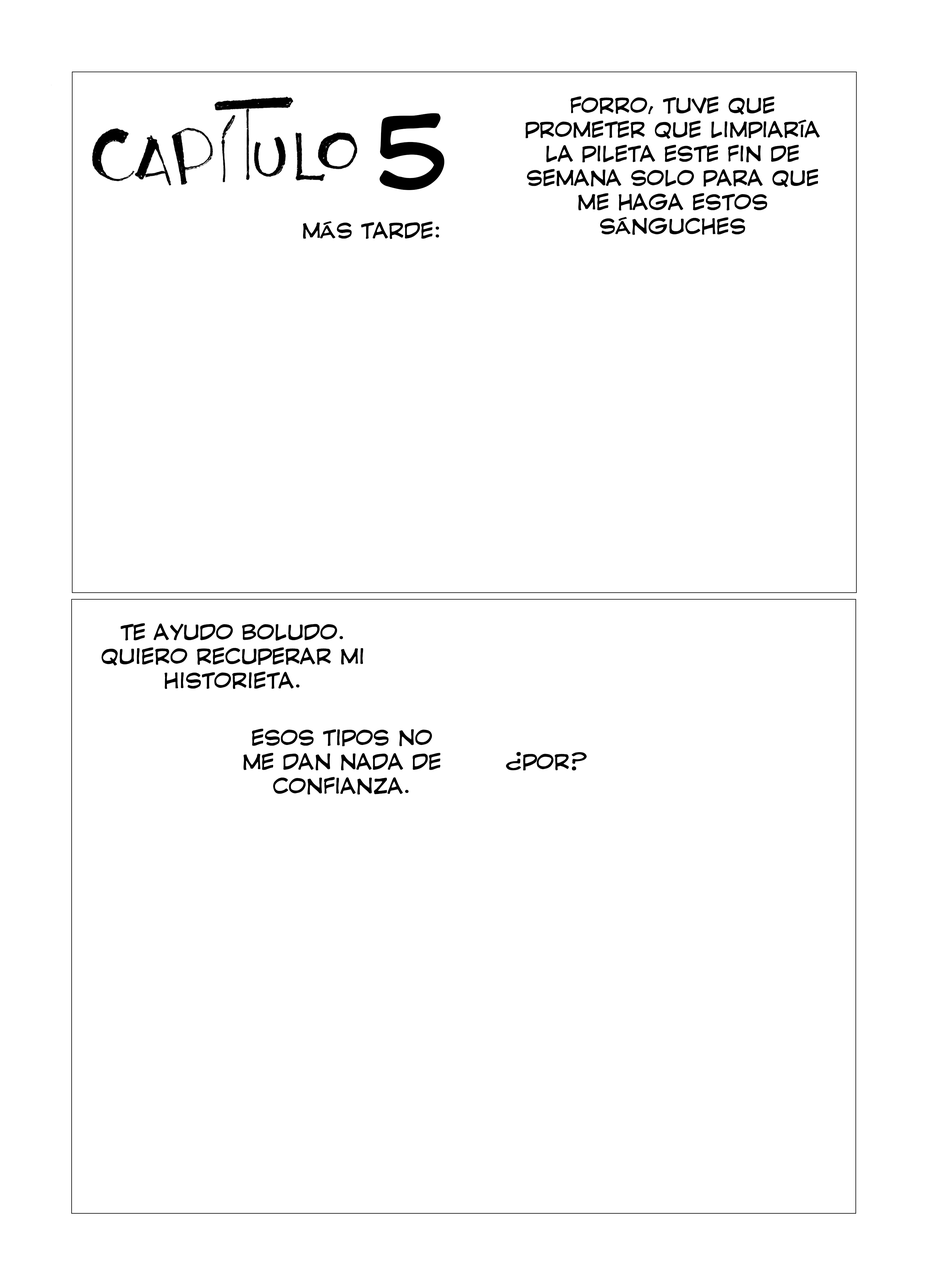
<style>
.page{position:relative;width:928px;height:1285px;background:#ffffff}
.page>*{position:absolute;margin:0}
.t1{font:20.1px "CCComicrazy-Roman";color:#000000}
.t2{font:95.7px "CCComicrazy-Roman";color:#000000}
</style>
<div class="page">
<p class="t1" style="left:526px;top:96px;width:294px;height:139px;text-align:center">FORRO, TUVE QUE <br>PROMETER QUE LIMPIARÍA LA PILETA ESTE FIN DE SEMANA SOLO PARA QUE ME HAGA ESTOS <br>SÁNGUCHES</p>
<p class="t2" style="left:380px;top:113px;width:65px;height:77px">5</p>
<p class="t1" style="left:303px;top:221px;width:136px;height:18px">MÁS TARDE:</p>
<p class="t1" style="left:102px;top:623px;width:261px;height:66px;text-align:center">TE AYUDO BOLUDO. QUIERO RECUPERAR MI HISTORIETA.</p>
<p class="t1" style="left:243px;top:729px;width:198px;height:65px;text-align:center">ESOS TIPOS NO ME DAN NADA DE CONFIANZA.</p>
<p class="t1" style="left:506px;top:752px;width:81px;height:19px">¿POR?</p>
</div>
